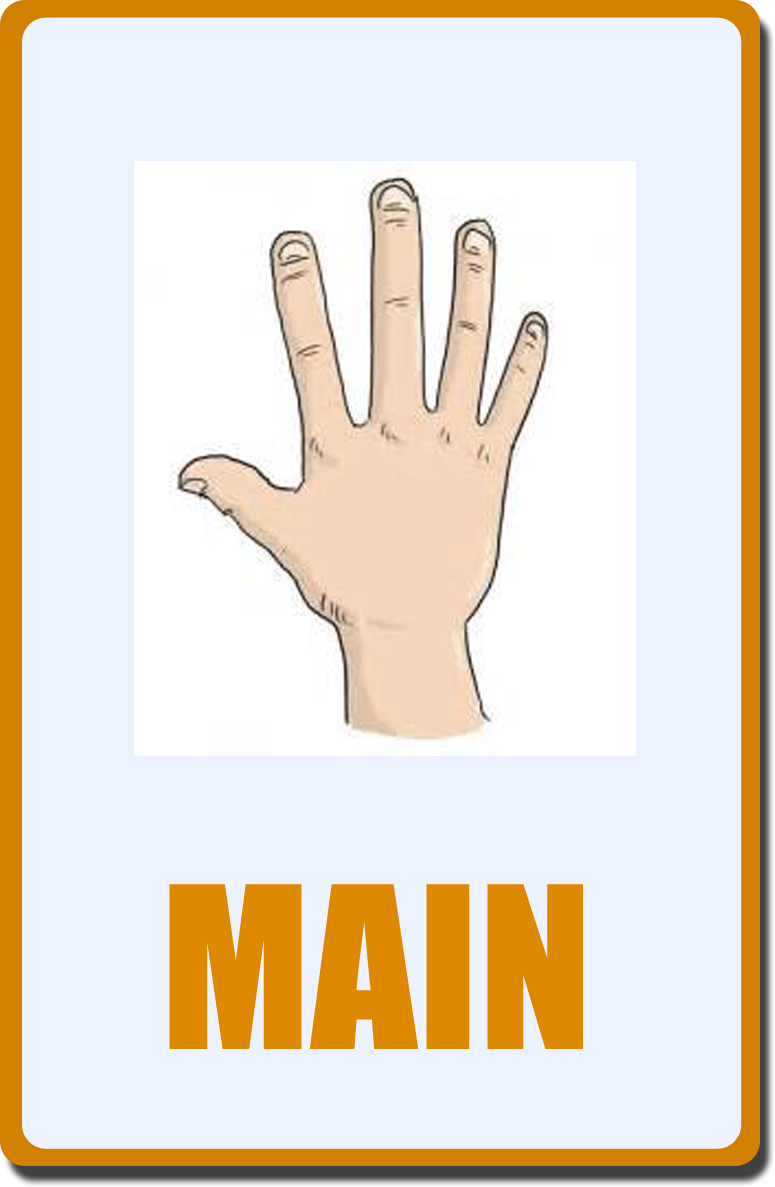
<style>
.page{position:relative;width:775px;height:1187px;background:#ecf2ff}
.page>*{position:absolute;margin:0}
.t1{font:208.3px "Impact";letter-spacing:0.005em;color:#de8800}
</style>
<div class="page">
<p class="t1" style="left:169px;top:884px;width:414px;height:165px">MAIN</p>
</div>
